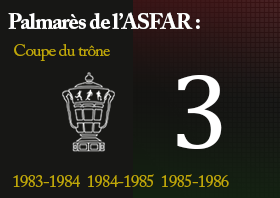
<style>
.page{position:relative;width:280px;height:198px;background:#171715}
.page>*{position:absolute;margin:0}
.t1{font:22.2px "ACaslonPro-Bold";letter-spacing:-0.04em;color:#ffffff}
.t2{font:16.7px "ACaslonPro-Regular";letter-spacing:-0.04em;color:#c0a808}
.t3{font:107.8px "CambriaMath";letter-spacing:-0.04em;color:#ffffff}
</style>
<div class="page">
<p class="t1" style="left:8px;top:12px;width:192px;height:17px">Palmarès de l’ASFAR :</p>
<p class="t2" style="left:14px;top:44px;width:96px;height:17px">Coupe du trône</p>
<p class="t3" style="left:177px;top:75px;width:45px;height:74px">3</p>
<p class="t2" style="left:13px;top:174px;width:216px;height:13px">1983-1984  1984-1985  1985-1986</p>
</div>
